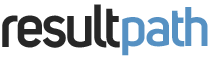
<style>
.page{position:relative;width:210px;height:60px;background:#ffffff}
.page>*{position:absolute;margin:0}
.t1{font:55px "UniSansSemiBold";letter-spacing:-0.05em;color:#5691c3}
.t2{font:60px "UniSansSemiBold";letter-spacing:-0.05em;color:#272727}
.t3{font:60px "UniSansSemiBold";letter-spacing:-0.06em;color:#272727}
.t4{font:60px "UniSansSemiBold";letter-spacing:-0.075em;color:#272727}
.t5{font:60px "UniSansSemiBold";letter-spacing:-0.035em;color:#272727}
</style>
<div class="page">
<p class="t1" style="left:2px;top:4px;width:206px;height:52px"><span class="t2">re</span><span class="t3">s</span><span class="t4">u</span><span class="t2">l</span><span class="t5">t</span>path</p>
</div>
